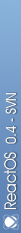
<style>
.page{position:relative;width:21px;height:233px}
.page>*{position:absolute;margin:0}
.t1{font:14px "AvantGardeITCbyBT-Book";color:#ffffff;scale:0.93 1}
.t2{font:16px "AvantGardeITCbyBT-Book";color:#ffffff;scale:0.93 1}
</style>
<div class="page">
<p class="t1" style="left:4px;top:93px;width:13px;height:117px;rotate:-90deg"><span class="t2">ReactOS</span>  0.4 - SVN</p>
</div>
